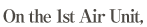
<style>
.page{position:relative;width:147px;height:27px;background:#ffffff}
.page>*{position:absolute;margin:0}
.t1{font:18px "RyuminPro-ExBold";letter-spacing:-0.08em;color:#4c4843}
</style>
<div class="page">
<p class="t1" style="left:3px;top:9px;width:140px;height:16px">On the 1st Air Unit,</p>
</div>
